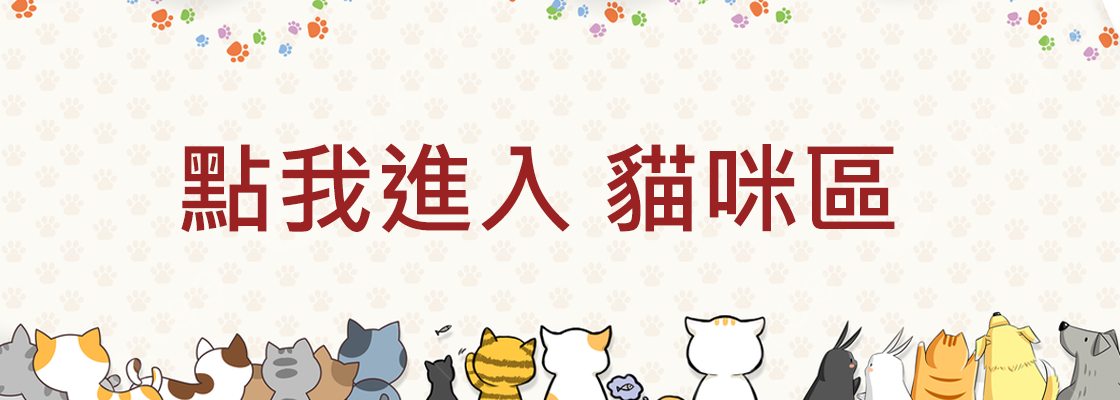
<style>
.page{position:relative;width:1120px;height:400px;background:#fbfaf5}
.page>*{position:absolute;margin:0}
.t1{font:100px "MicrosoftJhengHeiBold";color:#9a2222}
</style>
<div class="page">
<p class="t1" style="left:181px;top:143px;width:714px;height:90px">點我進入 貓咪區</p>
</div>
